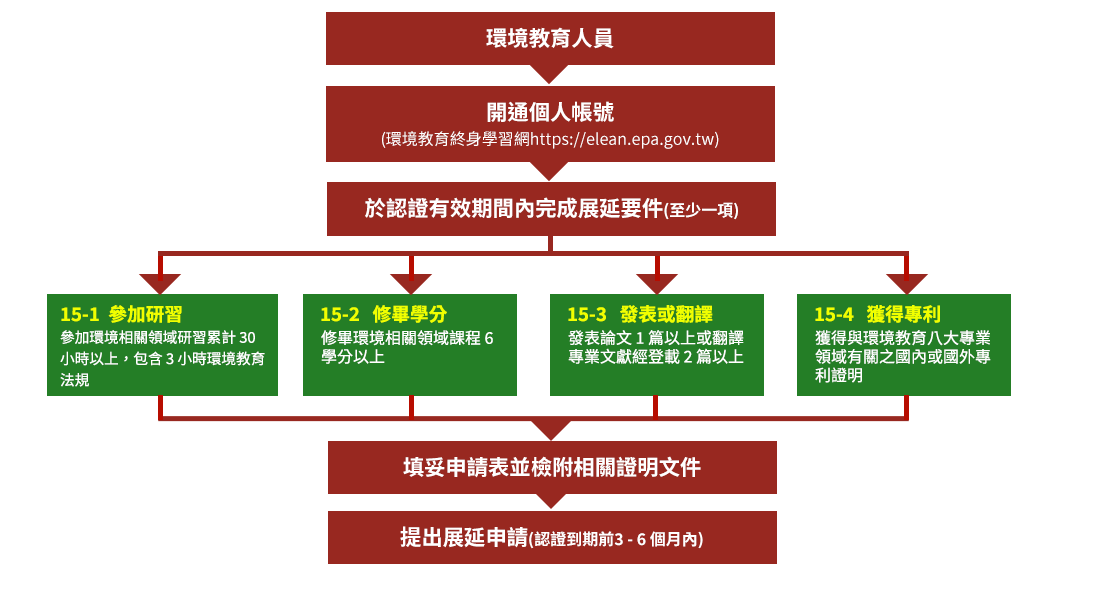
<style>
.page{position:relative;width:1100px;height:592px;background:#ffffff}
.page>*{position:absolute;margin:0}
.t1{font:21.3px "SourceHanSansTC-Bold";color:#ffffff}
.t2{font:16px/29.3px "SourceHanSansTC-Regular";color:#ffffff}
.t3{font:21.3px/29.3px "SourceHanSansTC-Bold";color:#ffffff}
.t4{font:16px "SourceHanSansTC-Bold";color:#ffffff}
.t5{font:18.7px "SourceHanSansTC-Bold";color:#f0ff00}
.t6{font:14.7px/21.3px "SourceHanSansTC-Regular";color:#ffffff}
.t7{font:16px/18.7px "SourceHanSansTC-Regular";color:#ffffff}
</style>
<div class="page">
<p class="t1" style="left:486px;top:27px;width:128px;height:22px">環境教育人員</p>
<p class="t2" style="left:382px;top:101px;width:337px;height:48px;text-align:center"><span class="t3">開通個人帳號<br></span>(環境教育終身學習網https://elean.epa.gov.tw)</p>
<p class="t1" style="left:365px;top:197px;width:373px;height:23px">於認證有效期間內完成展延要件<span class="t4">(至少一項)</span></p>
<p class="t5" style="left:61px;top:305px;width:121px;height:18px">15-1  參加研習</p>
<p class="t5" style="left:321px;top:305px;width:126px;height:18px">15-2   修畢學分</p>
<p class="t5" style="left:568px;top:305px;width:145px;height:18px">15-3   發表或翻譯</p>
<p class="t5" style="left:815px;top:305px;width:125px;height:18px">15-4   獲得專利</p>
<p class="t6" style="left:60px;top:330px;width:205px;height:57px">參加環境相關領域研習累計 30 小時以上，包含 3 小時環境教育法規</p>
<p class="t7" style="left:321px;top:330px;width:172px;height:34px">修畢環境相關領域課程 6學分以上</p>
<p class="t7" style="left:568px;top:330px;width:176px;height:34px">發表論文 1 篇以上或翻譯專業文獻經登載 2 篇以上</p>
<p class="t7" style="left:815px;top:330px;width:176px;height:53px">獲得與環境教育八大專業領域有關之國內或國外專利證明</p>
<p class="t1" style="left:403px;top:456px;width:298px;height:22px">填妥申請表並檢附相關證明文件</p>
<p class="t4" style="left:400px;top:526px;width:303px;height:23px"><span class="t1">提出展延申請</span>(認證到期前3 - 6 個月內)</p>
</div>
